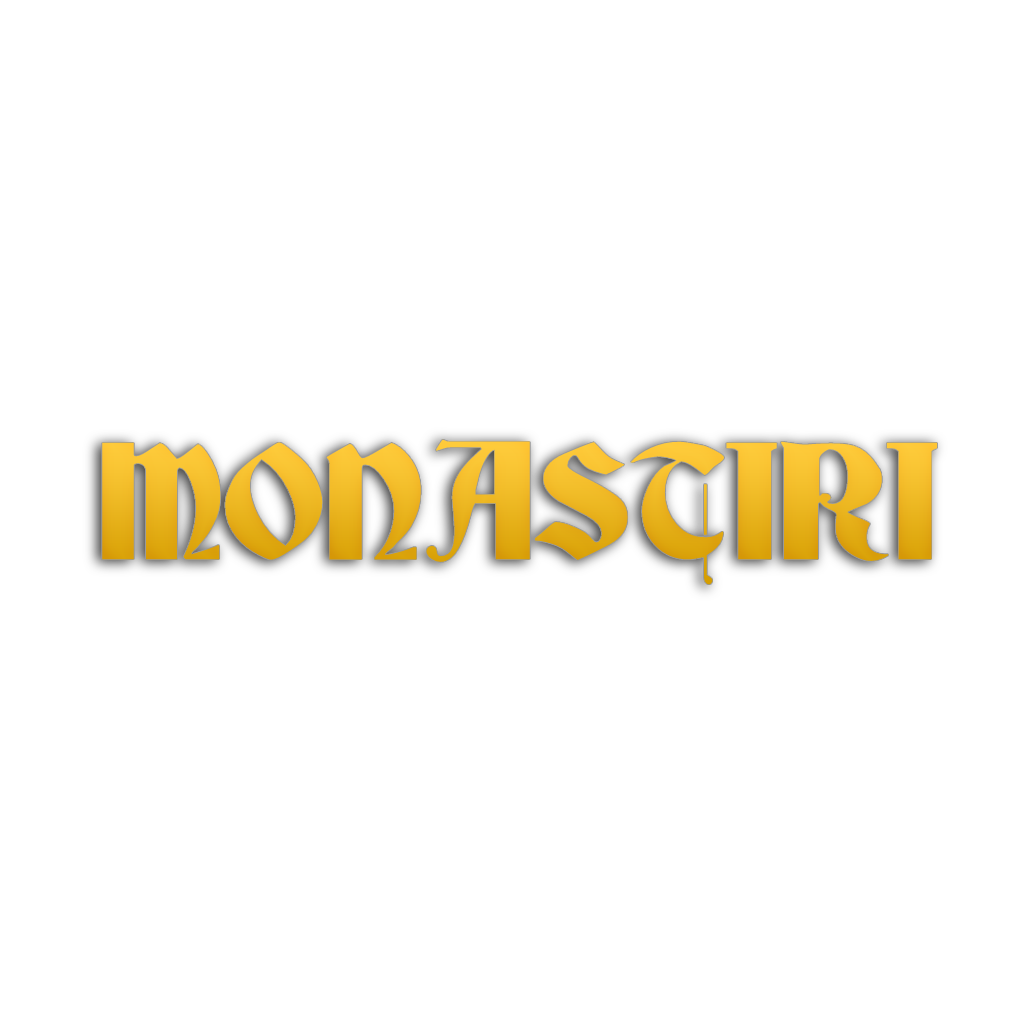
<style>
.page{position:relative;width:1024px;height:1024px;background:#ffffff}
.page>*{position:absolute;margin:0}
.t1{font:150px "Deutsch-Gothic";color:#eeb723}
</style>
<div class="page">
<p class="t1" style="left:102px;top:439px;width:836px;height:146px">MONASTIRI</p>
</div>
